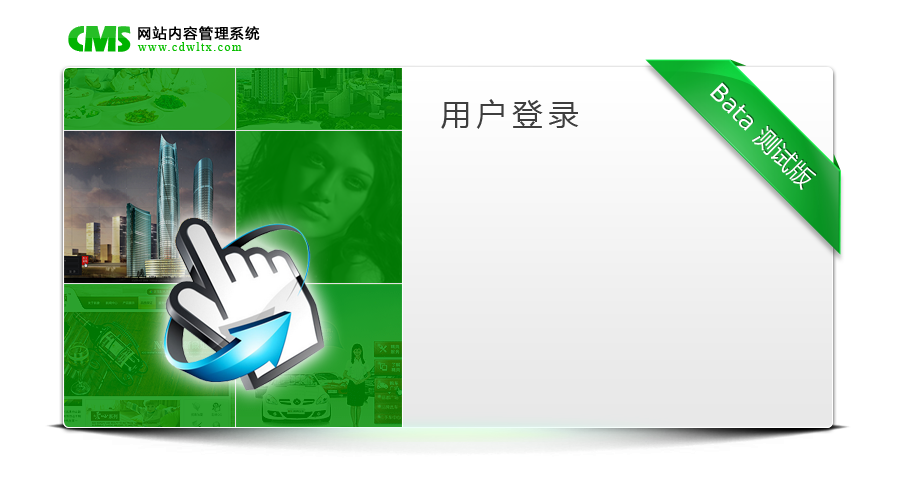
<style>
.page{position:relative;width:900px;height:500px;background:#ffffff}
.page>*{position:absolute;margin:0}
.t1{font:37px "ErasITC-Bold";letter-spacing:-0.05em;font-weight:bold}
.t2{font:14px "MicrosoftYaHei";letter-spacing:0.075em;font-weight:bold}
.t3{font:14px "MicrosoftYaHei";letter-spacing:0.075em;color:#000000;font-weight:bold}
.t4{font:12px "TimesNewRomanPSMT";letter-spacing:0.12em}
.t5{font:12px "TimesNewRomanPSMT";letter-spacing:0.12em;color:#0abf01}
.t6{font:30px "MicrosoftYaHei";letter-spacing:0.2em}
.t7{font:30px "MicrosoftYaHei";letter-spacing:0.2em;color:#3e3e3e}
</style>
<div class="page">
<p class="t1" style="left:84px;top:26px;width:33px;height:26px">M</p>
<p class="t2" style="left:138px;top:27px;width:122px;height:15px">网站内容管理系统</p>
<p class="t3" style="left:138px;top:26px;width:122px;height:15px">网站内容管理系统</p>
<p class="t4" style="left:137px;top:43px;width:105px;height:9px">www.cdwltx.com</p>
<p class="t5" style="left:137px;top:42px;width:105px;height:9px">www.cdwltx.com</p>
<p class="t6" style="left:441px;top:100px;width:138px;height:30px">用户登录</p>
<p class="t7" style="left:441px;top:99px;width:138px;height:30px">用户登录</p>
</div>
